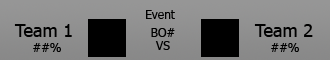
<style>
.page{position:relative;width:330px;height:60px}
.page>*{position:absolute;margin:0}
.t1{font:12px "Tahoma";color:#000000}
.t2{font:18px "Tahoma";color:#000000}
</style>
<div class="page">
<p class="t1" style="left:146px;top:10px;width:29px;height:9px">Event</p>
<p class="t2" style="left:14px;top:24px;width:58px;height:13px">Team 1</p>
<p class="t1" style="left:151px;top:28px;width:24px;height:9px">BO#</p>
<p class="t2" style="left:254px;top:24px;width:59px;height:13px">Team 2</p>
<p class="t1" style="left:155px;top:41px;width:15px;height:9px">VS</p>
<p class="t1" style="left:33px;top:43px;width:28px;height:9px">##%</p>
<p class="t1" style="left:271px;top:43px;width:28px;height:9px">##%</p>
</div>
